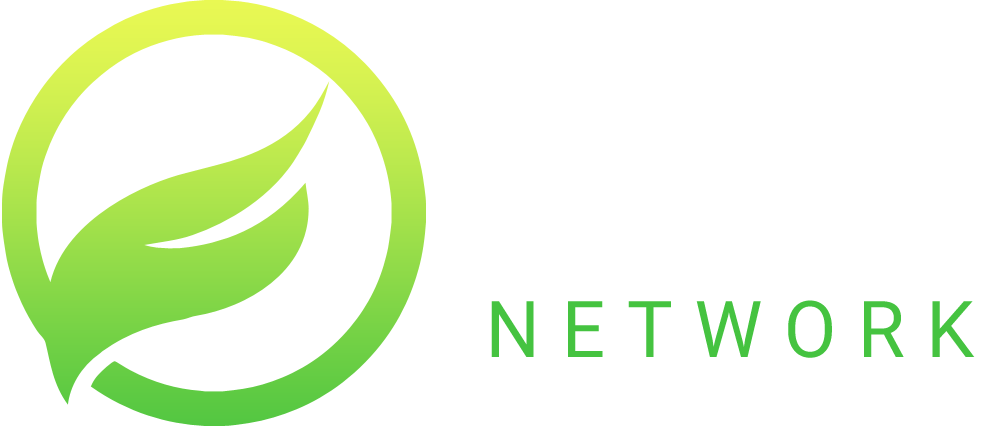
<style>
.page{position:relative;width:1000px;height:428px;background:#ffffff}
.page>*{position:absolute;margin:0}
.t1{font:78.3px "Roboto-Regular";letter-spacing:0.28em;color:#45c340}
</style>
<div class="page">
<p class="t1" style="left:491px;top:300px;width:484px;height:58px">NETWORK</p>
</div>
